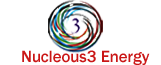
<style>
.page{position:relative;width:161px;height:65px;background:#ffffff}
.page>*{position:absolute;margin:0}
.t1{font:16.7px "FranklinGothic-Medium";color:#ca1616}
</style>
<div class="page">
<p class="t1" style="left:22px;top:50px;width:128px;height:15px">Nucleous3 Energy</p>
</div>
